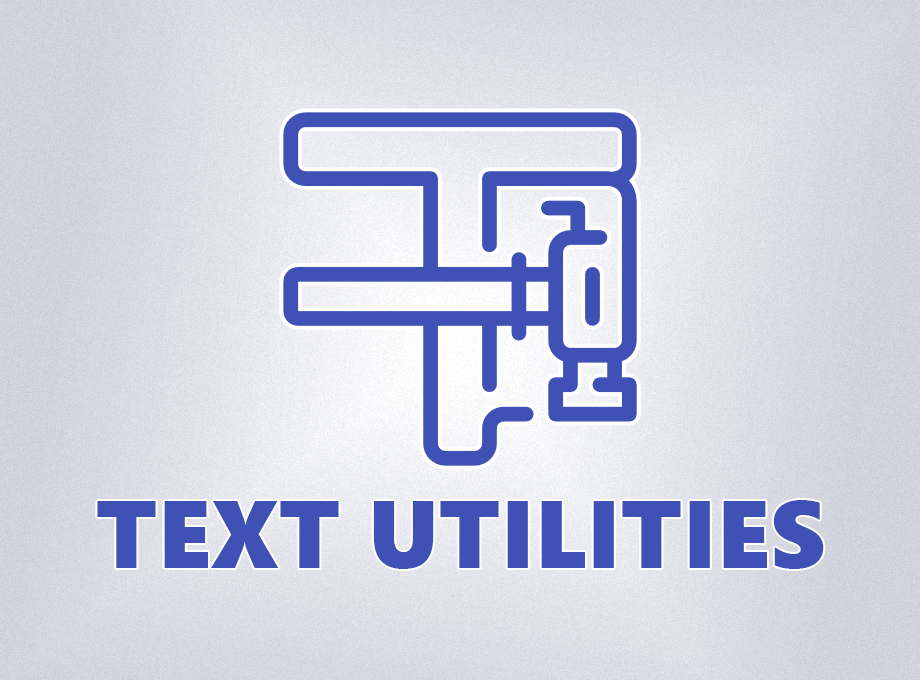
<style>
.page{position:relative;width:920px;height:680px}
.page>*{position:absolute;margin:0}
.t1{font:96px "SegoeUIBlack";letter-spacing:0.005em;color:#3f51b5;text-transform:uppercase}
</style>
<div class="page">
<p class="t1" style="left:97px;top:500px;width:727px;height:69px">Text Utilities</p>
</div>
